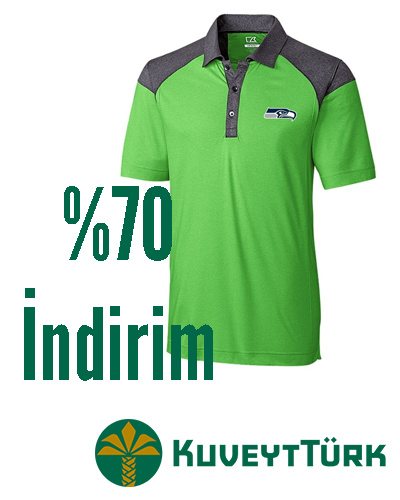
<style>
.page{position:relative;width:400px;height:500px;background:#ffffff}
.page>*{position:absolute;margin:0}
.t1{font:100px "LeagueGothic-Regular";color:#006748}
</style>
<div class="page">
<p class="t1" style="left:24px;top:186px;width:189px;height:195px;text-align:center">%70 İndirim</p>
</div>
